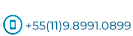
<style>
.page{position:relative;width:133px;height:36px;background:#ffffff}
.page>*{position:absolute;margin:0}
.t1{font:11.8px "Montserrat-Medium";color:#006e98}
</style>
<div class="page">
<p class="t1" style="left:26px;top:21px;width:105px;height:11px">+55(11)9.8991.0899</p>
</div>
